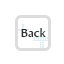
<style>
.page{position:relative;width:64px;height:64px;background:#ffffff}
.page>*{position:absolute;margin:0}
.t1{font:12px "AmiraParadiso";color:#333333}
</style>
<div class="page">
<p class="t1" style="left:21px;top:28px;width:25px;height:9px">Back</p>
</div>
